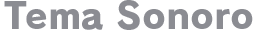
<style>
.page{position:relative;width:258px;height:30px;background:#ffffff}
.page>*{position:absolute;margin:0}
.t1{font:36px "RodinPro-EB";color:#8b8c92}
</style>
<div class="page">
<p class="t1" style="left:4px;top:0px;width:249px;height:30px">Tema Sonoro</p>
</div>
